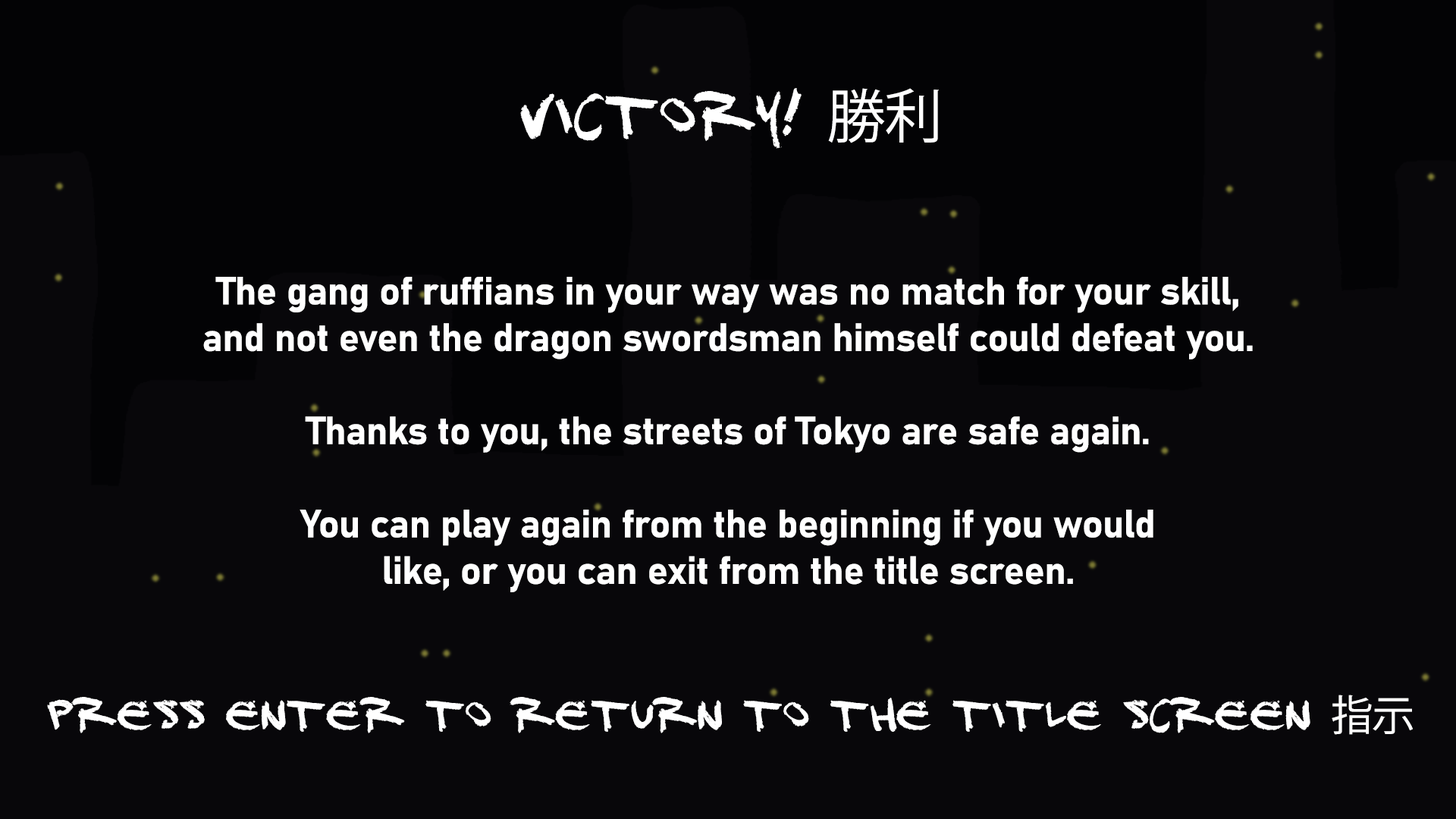
<style>
.page{position:relative;width:1456px;height:819px;background:#08070a}
.page>*{position:absolute;margin:0}
.t1{font:58px "DJ-Gross";letter-spacing:-0.01em;color:#ffffff}
.t2{font:58px "KozGoPr6N-Regular";letter-spacing:-0.01em;color:#ffffff}
.t3{font:38.8px "Bahnschrift-Bold";letter-spacing:-0.01em;color:#ffffff}
.t4{font:41.8px "DJ-Gross";letter-spacing:-0.01em;color:#ffffff}
.t5{font:41.8px "KozGoPr6N-Regular";letter-spacing:-0.01em;color:#ffffff}
</style>
<div class="page">
<p class="t1" style="left:520px;top:88px;width:419px;height:61px">victory! <span class="t2">勝利</span></p>
<p class="t3" style="left:203px;top:277px;width:1050px;height:315px;text-align:center">The gang of ruffians in your way was no match for your skill,<br>and not even the dragon swordsman himself could defeat you.<br><br>Thanks to you, the streets of Tokyo are safe again.<br><br>You can play again from the beginning if you would<br>like, or you can exit from the title screen.</p>
<p class="t4" style="left:47px;top:695px;width:1366px;height:40px">PRESS ENTER TO RETURN TO THE TITLE SCREEN <span class="t5">指示</span></p>
</div>
